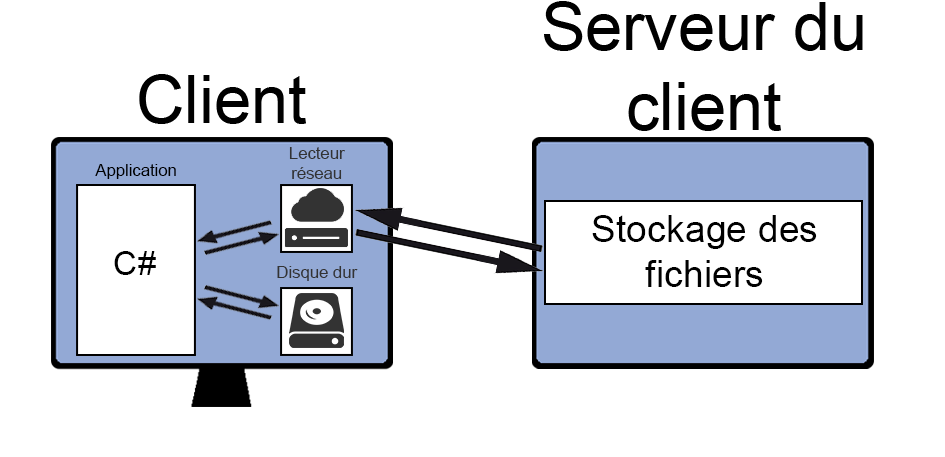
<style>
.page{position:relative;width:945px;height:457px;background:#ffffff}
.page>*{position:absolute;margin:0}
.t1{font:66.7px "ArialMT";color:#000000}
.t2{font:16.7px "ArialMT";color:#333333}
.t3{font:16.7px "ArialMT";color:#000000}
.t4{font:37.5px "ArialMT";color:#000000}
.t5{font:33.3px "ArialMT";color:#000000}
</style>
<div class="page">
<p class="t1" style="left:544px;top:1px;width:319px;height:130px;text-align:center">Serveur du<br>client</p>
<p class="t1" style="left:139px;top:74px;width:167px;height:50px">Client</p>
<p class="t2" style="left:289px;top:147px;width:56px;height:32px;text-align:center">Lecteur<br>réseau</p>
<p class="t3" style="left:95px;top:164px;width:81px;height:15px">Application</p>
<p class="t4" style="left:592px;top:215px;width:225px;height:72px;text-align:center">Stockage des<br>fichiers</p>
<p class="t5" style="left:114px;top:251px;width:42px;height:24px">C#</p>
<p class="t2" style="left:277px;top:266px;width:81px;height:15px">Disque dur</p>
</div>
